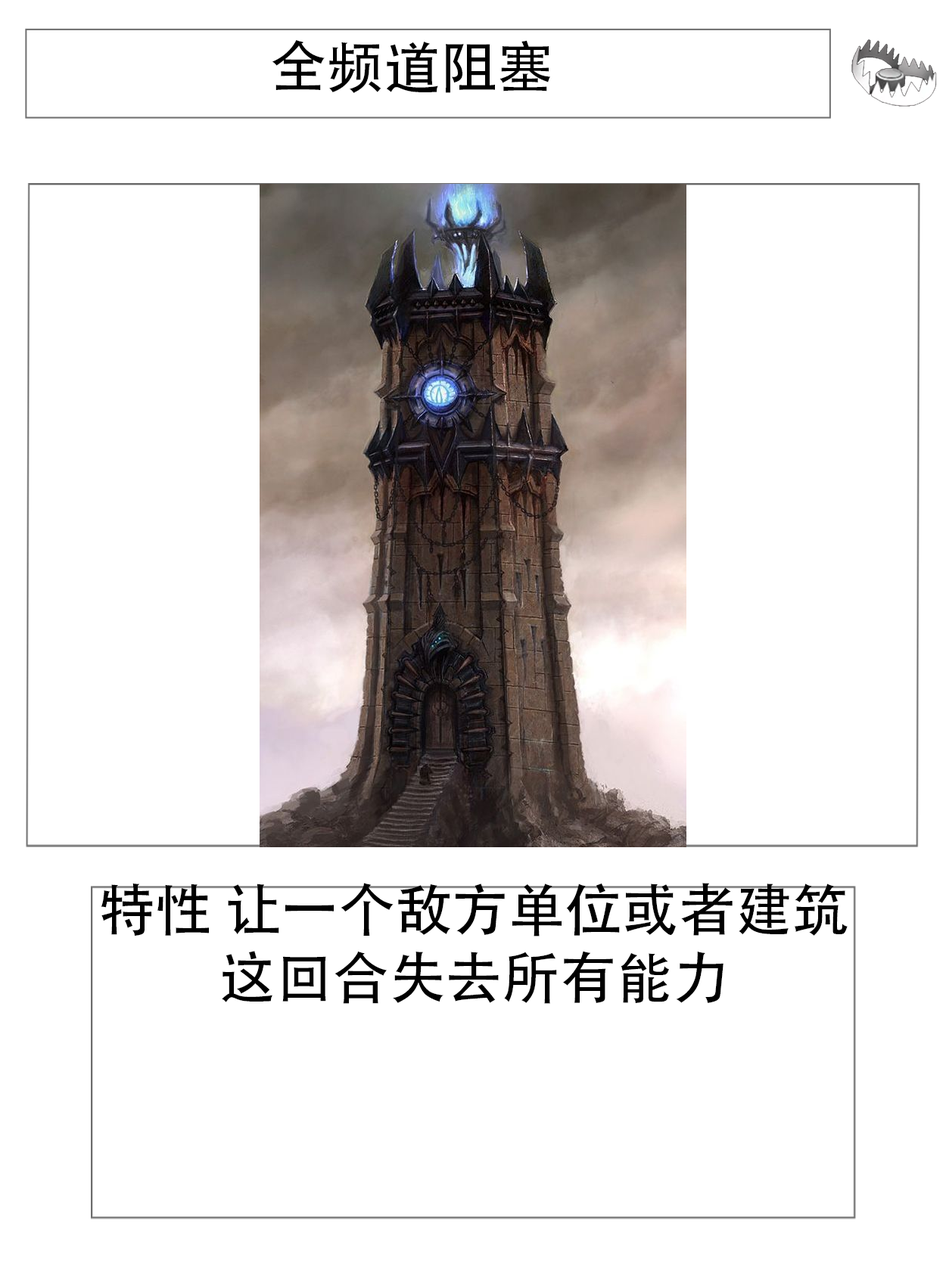
<style>
.page{position:relative;width:946px;height:1261px;background:#ffffff}
.page>*{position:absolute;margin:0}
.t1{font:56.7px "AdobeHeitiStd-Regular";color:#000000}
</style>
<div class="page">
<p class="t1" style="left:272px;top:40px;width:278px;height:53px">全频道阻塞</p>
<p class="t1" style="left:101px;top:883px;width:746px;height:121px;text-align:center">特性 让一个敌方单位或者建筑这回合失去所有能力</p>
</div>
